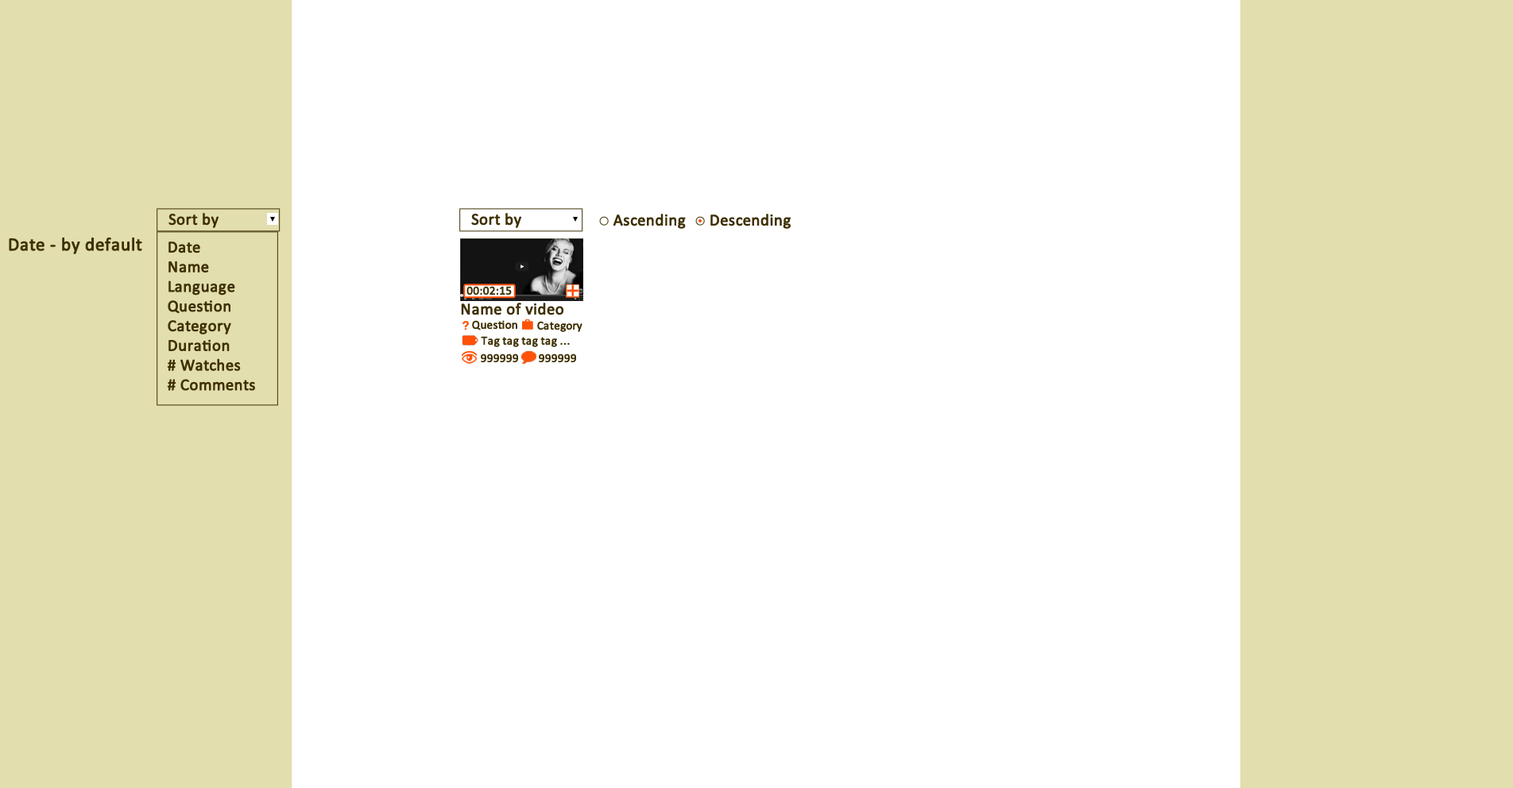
<style>
.page{position:relative;width:1513px;height:788px;background:#ffffff}
.page>*{position:absolute;margin:0}
.t1{font:16.4px "Calibri";color:#3e3003;font-weight:bold}
.t2{font:18.4px "Calibri";color:#3e3003;font-weight:bold}
.t3{font:11.9px "Calibri";color:#3e3003;font-weight:bold}
</style>
<div class="page">
<p class="t1" style="left:168px;top:213px;width:51px;height:15px">Sort by</p>
<p class="t1" style="left:471px;top:213px;width:50px;height:15px">Sort by</p>
<p class="t1" style="left:613px;top:214px;width:73px;height:15px">Ascending</p>
<p class="t1" style="left:710px;top:214px;width:81px;height:15px">Descending</p>
<p class="t2" style="left:9px;top:238px;width:133px;height:16px">Date - by default</p>
<p class="t1" style="left:167px;top:242px;width:88px;height:149px">Date<br>Name<br>Language<br>Question<br>Category<br>Duration<br># Watches<br># Comments</p>
<p class="t1" style="left:461px;top:303px;width:103px;height:12px">Name of video</p>
<p class="t3" style="left:472px;top:320px;width:45px;height:11px">Question</p>
<p class="t3" style="left:537px;top:321px;width:45px;height:11px">Category</p>
<p class="t3" style="left:481px;top:336px;width:89px;height:11px">Tag tag tag tag ...</p>
<p class="t3" style="left:481px;top:354px;width:37px;height:9px">999999</p>
<p class="t3" style="left:539px;top:354px;width:37px;height:9px">999999</p>
</div>
